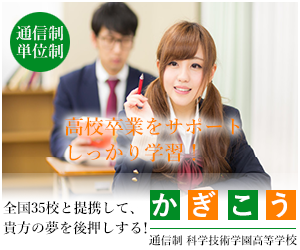
<style>
.page{position:relative;width:300px;height:250px}
.page>*{position:absolute;margin:0}
.t1{font:16px/18px "YuMincho-Demibold";color:#ffffff}
.t2{font:20px/26px "YuMincho-Demibold";color:#ff7f00}
.t3{font:28px "YuGothic-Bold";color:#ffffff}
.t4{font:14px/20px "YuMincho-Demibold";color:#000000}
.t5{font:11px "YuMincho-Demibold";color:#000000}
.t6{font:12px "YuMincho-Demibold";color:#000000}
</style>
<div class="page">
<p class="t1" style="left:16px;top:25px;width:47px;height:34px">通信制<br>単位制</p>
<p class="t2" style="left:65px;top:117px;width:175px;height:45px">高校卒業をサポート<br>しっかり学習！</p>
<p class="t3" style="left:152px;top:193px;width:25px;height:24px">か</p>
<p class="t3" style="left:192px;top:191px;width:24px;height:26px">ぎ</p>
<p class="t3" style="left:233px;top:195px;width:19px;height:21px">こ</p>
<p class="t3" style="left:271px;top:192px;width:16px;height:26px">う</p>
<p class="t4" style="left:3px;top:201px;width:144px;height:34px">全国35校と提携して、<br>貴方の夢を後押しする！</p>
<p class="t5" style="left:149px;top:234px;width:148px;height:12px"><span class="t6">通</span>信制 科学技術学園高等学<span class="t6">校</span></p>
</div>
